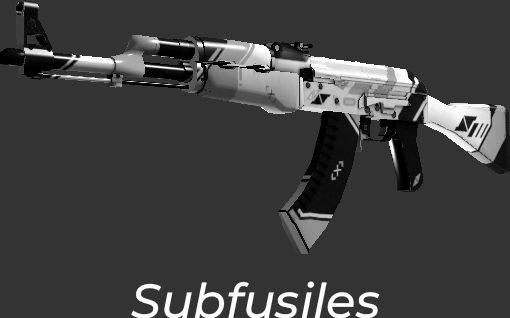
<style>
.page{position:relative;width:510px;height:318px;background:#333333}
.page>*{position:absolute;margin:0}
.t1{font:48px "MontserratItalic-MediumItalic";color:#ffffff}
</style>
<div class="page">
<p class="t1" style="left:131px;top:281px;width:249px;height:38px">Subfusiles</p>
</div>
